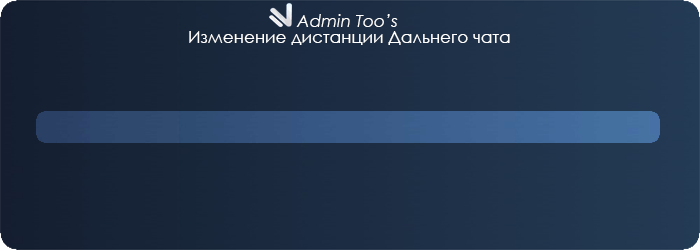
<style>
.page{position:relative;width:700px;height:250px}
.page>*{position:absolute;margin:0}
.t1{font:17px "CenturyGothic-Italic";color:#ffffff}
.t2{font:17px "CenturyGothic";color:#ffffff}
</style>
<div class="page">
<p class="t1" style="left:296px;top:14px;width:102px;height:13px">Admin Too’s</p>
<p class="t2" style="left:189px;top:31px;width:321px;height:14px">Изменение дистанции Дальнего чата</p>
</div>
